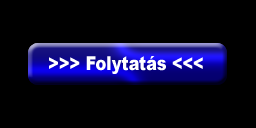
<style>
.page{position:relative;width:256px;height:128px;background:#000000}
.page>*{position:absolute;margin:0}
.t1{font:19.2px "Arial-Black";color:#ffffff;scale:0.83 1}
</style>
<div class="page">
<p class="t1" style="left:49px;top:56px;width:154px;height:18px">&gt;&gt;&gt; Folytatás &lt;&lt;&lt;</p>
</div>
